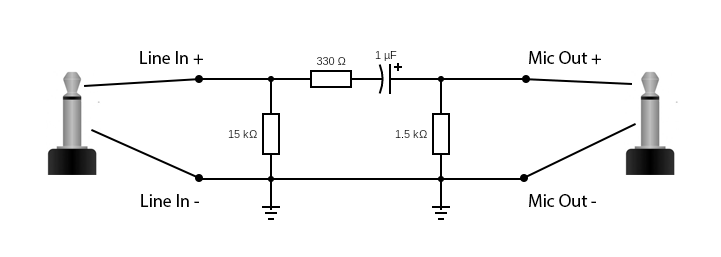
<style>
.page{position:relative;width:721px;height:257px;background:#ffffff}
.page>*{position:absolute;margin:0}
.t1{font:18px "MyriadPro-Regular";color:#000000}
</style>
<div class="page">
<p class="t1" style="left:140px;top:51px;width:63px;height:14px">Line In +</p>
<p class="t1" style="left:529px;top:51px;width:72px;height:14px">Mic Out +</p>
<p class="t1" style="left:141px;top:194px;width:58px;height:13px">Line In -</p>
<p class="t1" style="left:529px;top:194px;width:67px;height:13px">Mic Out -</p>
</div>
